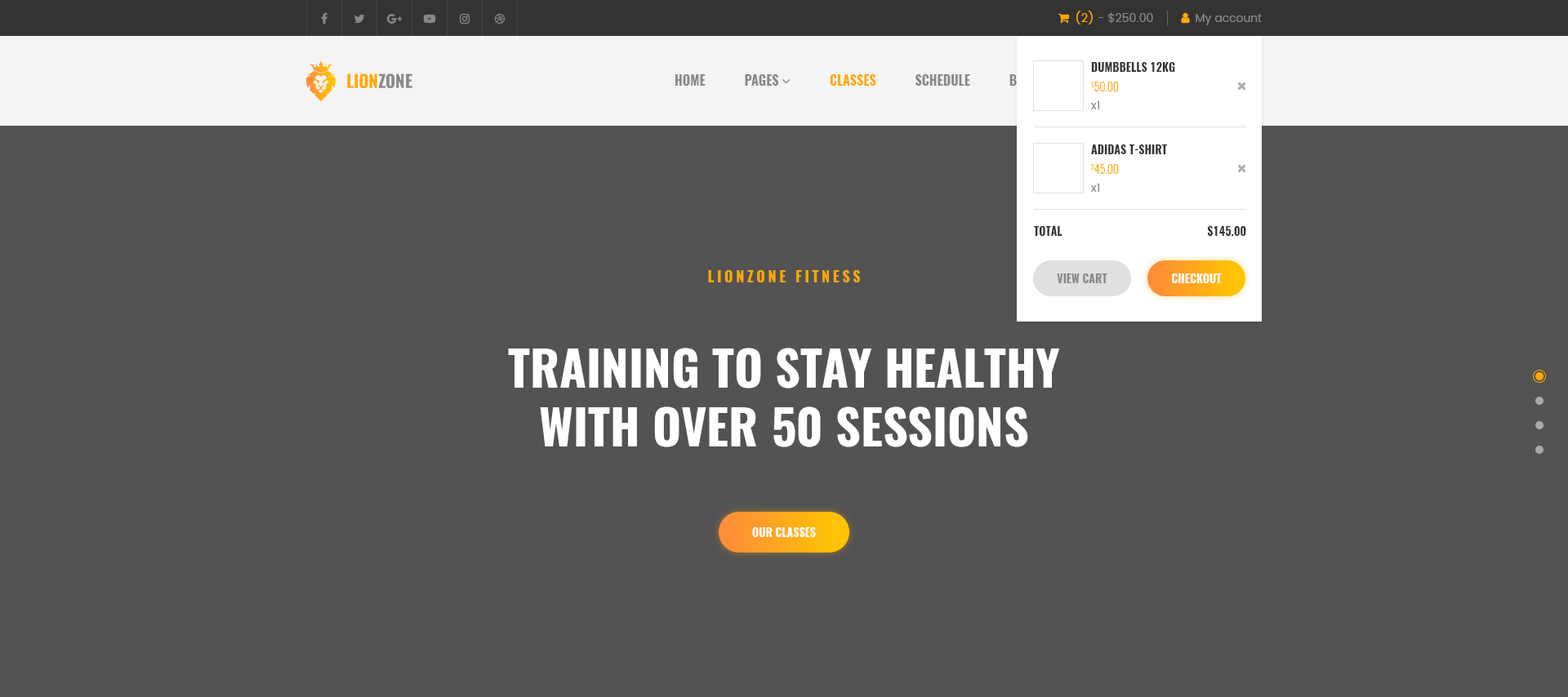
<style>
.page{position:relative;width:1568px;height:697px;background:#535353}
.page>*{position:absolute;margin:0}
.t1{font:11.4px/19.6px "Oswald-Bold";color:#333333;text-transform:uppercase}
.t2{font:11.4px/19.6px "Oswald-Light";color:#ffa901;text-transform:uppercase}
.t3{font:11.4px/18px "Poppins-Regular";color:#888888}
.t4{font:11.4px "Oswald-Bold";color:#333333;text-transform:uppercase}
.t5{font:14.7px "Oswald-Bold";letter-spacing:0.2em;color:#ffa901;text-transform:uppercase}
.t6{font:11.4px "Oswald-Bold";color:#888888;text-transform:uppercase}
.t7{font:11.4px "Oswald-Bold";color:#ffffff;text-transform:uppercase}
.t8{font:49px "Oswald-Bold";color:#ffffff;text-transform:uppercase}
</style>
<div class="page">
<p class="t1" style="left:1091px;top:62px;width:84px;height:47px">Dumbbells 12kg<br><span class="t2">$50.00<br></span><span class="t3">x1</span></p>
<p class="t1" style="left:1091px;top:145px;width:76px;height:47px">adidas T-Shirt<br><span class="t2">$45.00<br></span><span class="t3">x1</span></p>
<p class="t4" style="left:1034px;top:226px;width:28px;height:10px">total</p>
<p class="t4" style="left:1207px;top:225px;width:39px;height:13px">$145.00</p>
<p class="t5" style="left:708px;top:270px;width:152px;height:13px">lionzone fitness</p>
<p class="t6" style="left:1057px;top:274px;width:50px;height:9px">view cart</p>
<p class="t7" style="left:1172px;top:274px;width:50px;height:9px">checkout</p>
<p class="t8" style="left:508px;top:348px;width:552px;height:100px;text-align:center">training to stay healthy<br>with over 50 sessions</p>
<p class="t7" style="left:752px;top:528px;width:64px;height:9px">our classes</p>
</div>
